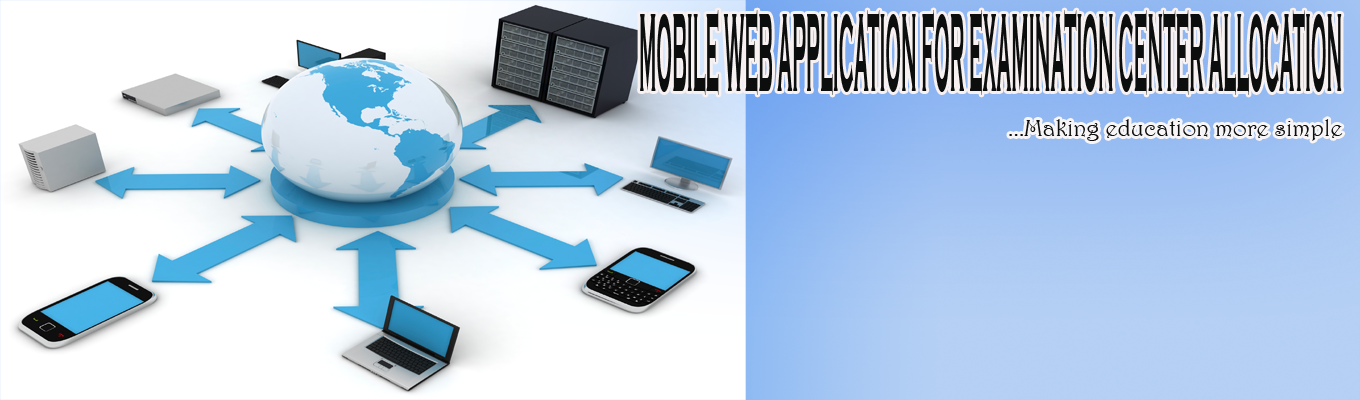
<style>
.page{position:relative;width:1360px;height:400px}
.page>*{position:absolute;margin:0}
.t1{font:114.8px "CopperplateGothic-Bold";color:#0c0d0d;scale:0.16 1}
.t2{font:24px "Harrington";color:#0c0d0d}
</style>
<div class="page">
<p class="t1" style="left:640px;top:10px;width:702px;height:85px">MOBILE WEB APPLICATION FOR EXAMINATION CENTER ALLOCATION</p>
<p class="t2" style="left:1009px;top:119px;width:334px;height:22px">...Making education more simple</p>
</div>
